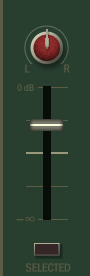
<style>
.page{position:relative;width:90px;height:276px;background:#283f2f}
.page>*{position:absolute;margin:0}
.t1{font:12px "FranklinGothic-MediumCond";color:#5b5b45}
.t2{font:10px "FranklinGothic-MediumCond";color:#5d5d46}
.t3{font:16px "FranklinGothic-MediumCond";color:#5b5b45}
</style>
<div class="page">
<p class="t1" style="left:25px;top:64px;width:5px;height:9px">L</p>
<p class="t1" style="left:64px;top:64px;width:6px;height:9px">R</p>
<p class="t2" style="left:17px;top:84px;width:17px;height:7px">0 dB</p>
<p class="t3" style="left:16px;top:216px;width:19px;height:6px">−∞</p>
<p class="t1" style="left:25px;top:263px;width:46px;height:9px">SELECTED</p>
</div>
